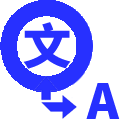
<style>
.page{position:relative;width:128px;height:128px;background:#ffffff}
.page>*{position:absolute;margin:0}
.t1{font:48px "SourceHanSansCN-Heavy";color:#2630ff}
</style>
<div class="page">
<p class="t1" style="left:23px;top:22px;width:48px;height:47px">文</p>
<p class="t1" style="left:86px;top:83px;width:34px;height:36px">A</p>
</div>
